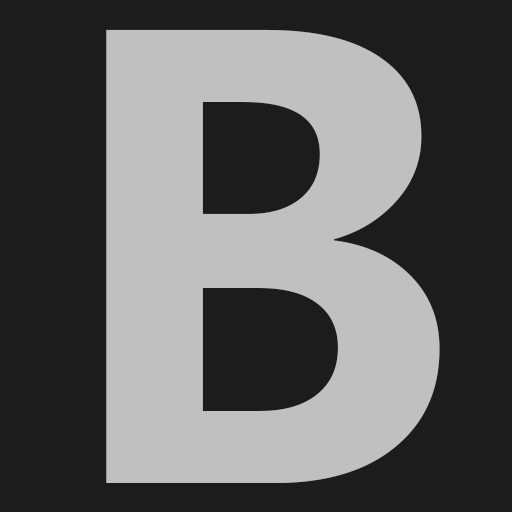
<style>
.page{position:relative;width:512px;height:512px;background:#1c1c1c}
.page>*{position:absolute;margin:0}
.t1{font:599px "MicrosoftYaHei-Bold";color:#c0c0c0}
</style>
<div class="page">
<p class="t1" style="left:106px;top:29px;width:334px;height:454px">B</p>
</div>
